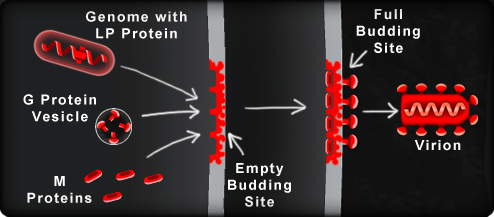
<style>
.page{position:relative;width:494px;height:217px}
.page>*{position:absolute;margin:0}
.t1{font:14px "Arial-BoldMT";letter-spacing:0.1em;color:#ffffff}
</style>
<div class="page">
<p class="t1" style="left:86px;top:11px;width:101px;height:28px;text-align:center">Genome with<br>LP Protein</p>
<p class="t1" style="left:356px;top:9px;width:64px;height:44px;text-align:center">Full<br>Budding<br>Site</p>
<p class="t1" style="left:23px;top:94px;width:73px;height:28px;text-align:center">G Protein<br>Vesicle</p>
<p class="t1" style="left:414px;top:140px;width:47px;height:11px">Virion</p>
<p class="t1" style="left:228px;top:163px;width:63px;height:44px;text-align:center">Empty<br>Budding<br>Site</p>
<p class="t1" style="left:27px;top:176px;width:65px;height:27px;text-align:center">M<br>Proteins</p>
</div>
